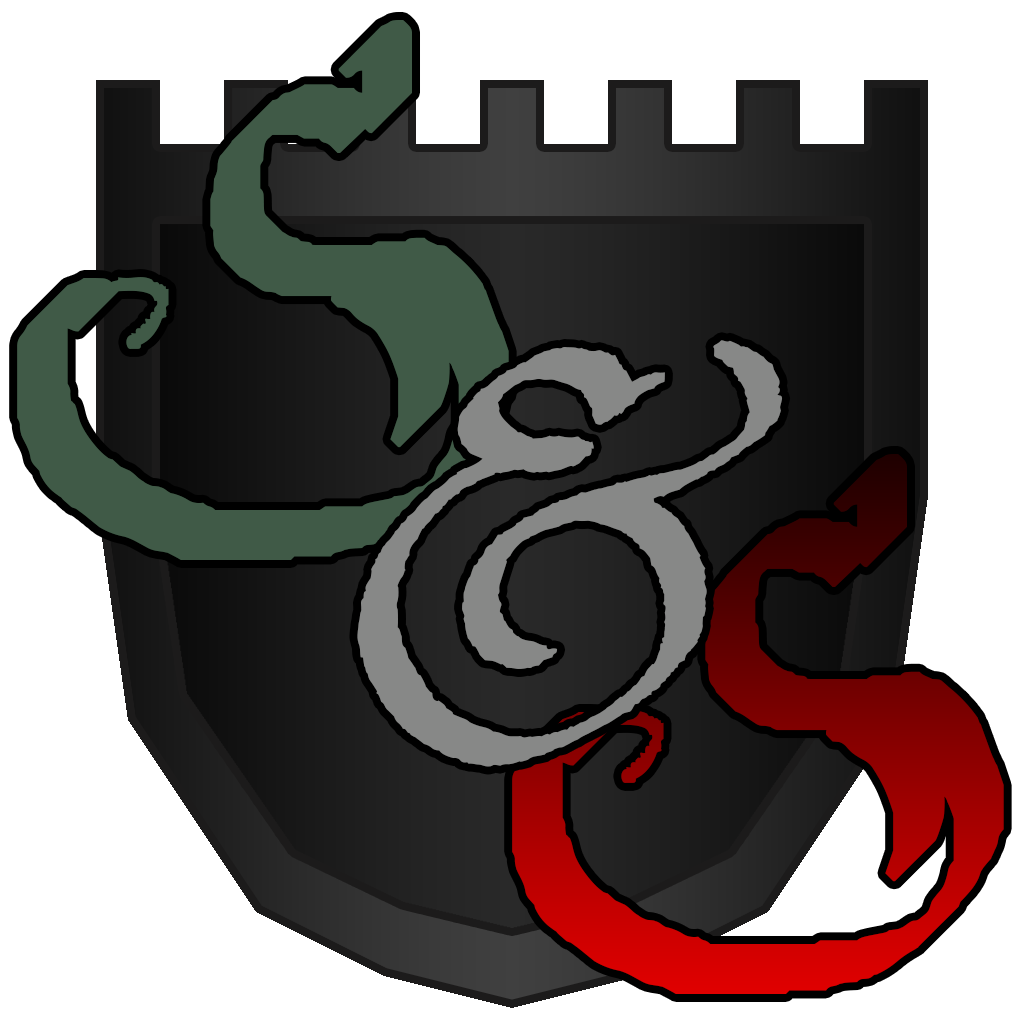
<style>
.page{position:relative;width:1024px;height:1024px;background:#ffffff}
.page>*{position:absolute;margin:0}
.t1{font:600px "PrincessSofia";color:#878887}
.t2{font:600px "ParryHotter"}
</style>
<div class="page">
<p class="t1" style="left:357px;top:340px;width:426px;height:427px">&amp;</p>
<p class="t2" style="left:512px;top:454px;width:492px;height:540px">S</p>
</div>
